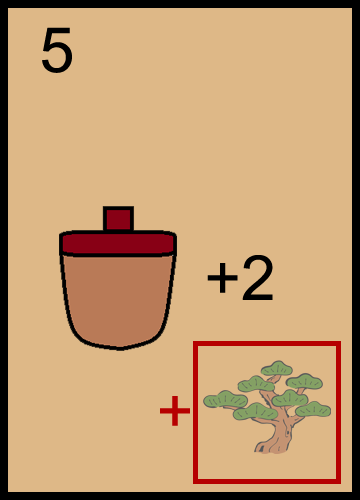
<style>
.page{position:relative;width:360px;height:500px;background:#deb887}
.page>*{position:absolute;margin:0}
.t1{font:62.5px "ArialUnicodeMS";color:#000000}
.t2{font:62.5px "ArialUnicodeMS";color:#b60000}
</style>
<div class="page">
<p class="t1" style="left:42px;top:27px;width:30px;height:46px">5</p>
<p class="t1" style="left:207px;top:255px;width:66px;height:45px">+2</p>
<p class="t2" style="left:160px;top:396px;width:30px;height:30px">+</p>
</div>
